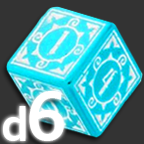
<style>
.page{position:relative;width:144px;height:144px;background:#333333}
.page>*{position:absolute;margin:0}
.t1{font:75px "Corbel-Bold";color:#ffffff}
.t2{font:50px "Corbel-Bold";color:#ffffff}
</style>
<div class="page">
<p class="t1" style="left:29px;top:91px;width:35px;height:50px"><span class="t2">  </span>6</p>
<p class="t2" style="left:3px;top:106px;width:23px;height:35px">d</p>
</div>
